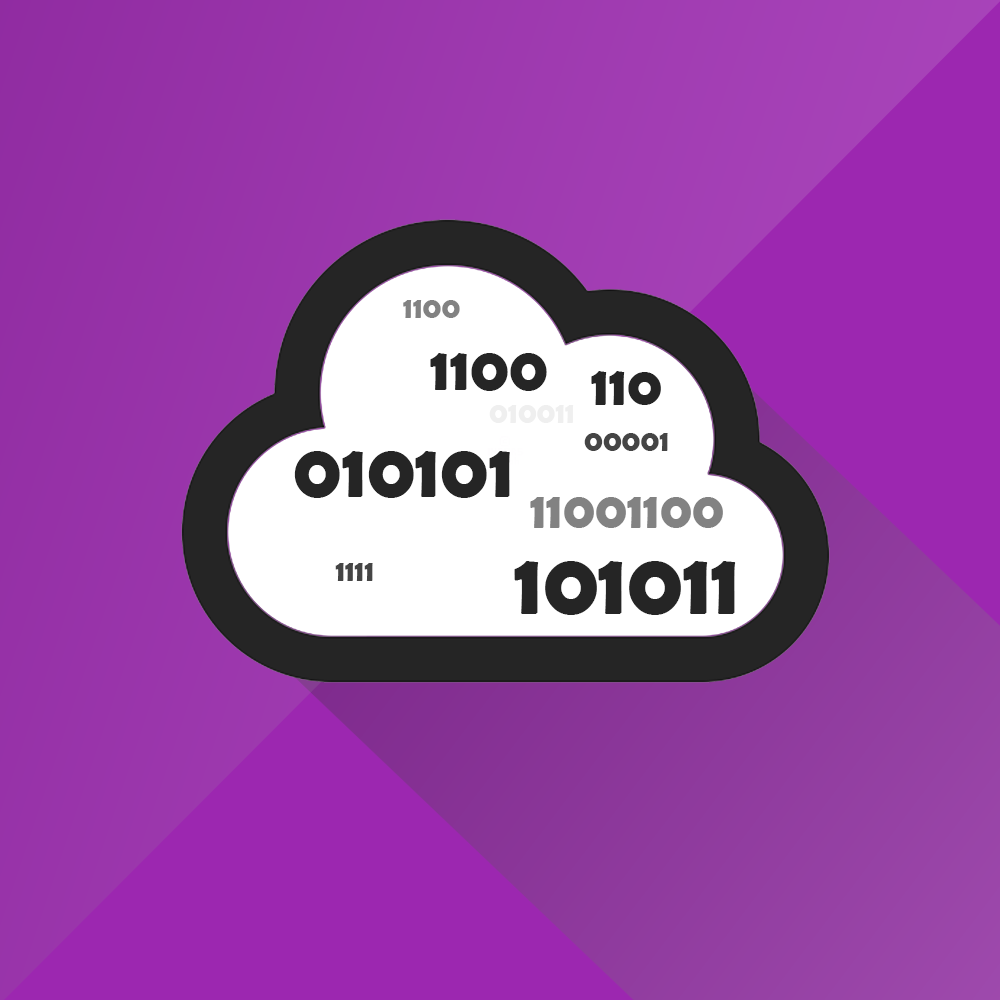
<style>
.page{position:relative;width:1000px;height:1000px}
.page>*{position:absolute;margin:0}
.t1{font:30px "BerlinSansFBDemi-Bold";color:#828282}
.t2{font:62.1px "BerlinSansFBDemi-Bold";color:#252525}
.t3{font:55.6px "BerlinSansFBDemi-Bold";color:#252525}
.t4{font:30px "BerlinSansFBDemi-Bold";color:#efefef}
.t5{font:30px "BerlinSansFBDemi-Bold";color:#454545}
.t6{font:77.4px "BerlinSansFBDemi-Bold";color:#252525}
.t7{font:51.6px "BerlinSansFBDemi-Bold";color:#828282}
.t8{font:89.5px "BerlinSansFBDemi-Bold";color:#252525}
</style>
<div class="page">
<p class="t1" style="left:403px;top:300px;width:57px;height:18px">1100</p>
<p class="t2" style="left:430px;top:353px;width:117px;height:38px">1100</p>
<p class="t3" style="left:591px;top:371px;width:70px;height:34px">110</p>
<p class="t4" style="left:489px;top:405px;width:85px;height:18px">010011</p>
<p class="t5" style="left:584px;top:433px;width:84px;height:18px">00001</p>
<p class="t6" style="left:294px;top:451px;width:216px;height:47px">010101</p>
<p class="t7" style="left:530px;top:497px;width:193px;height:31px">11001100</p>
<p class="t5" style="left:335px;top:563px;width:38px;height:18px">1111</p>
<p class="t8" style="left:514px;top:561px;width:222px;height:54px">101011</p>
</div>
